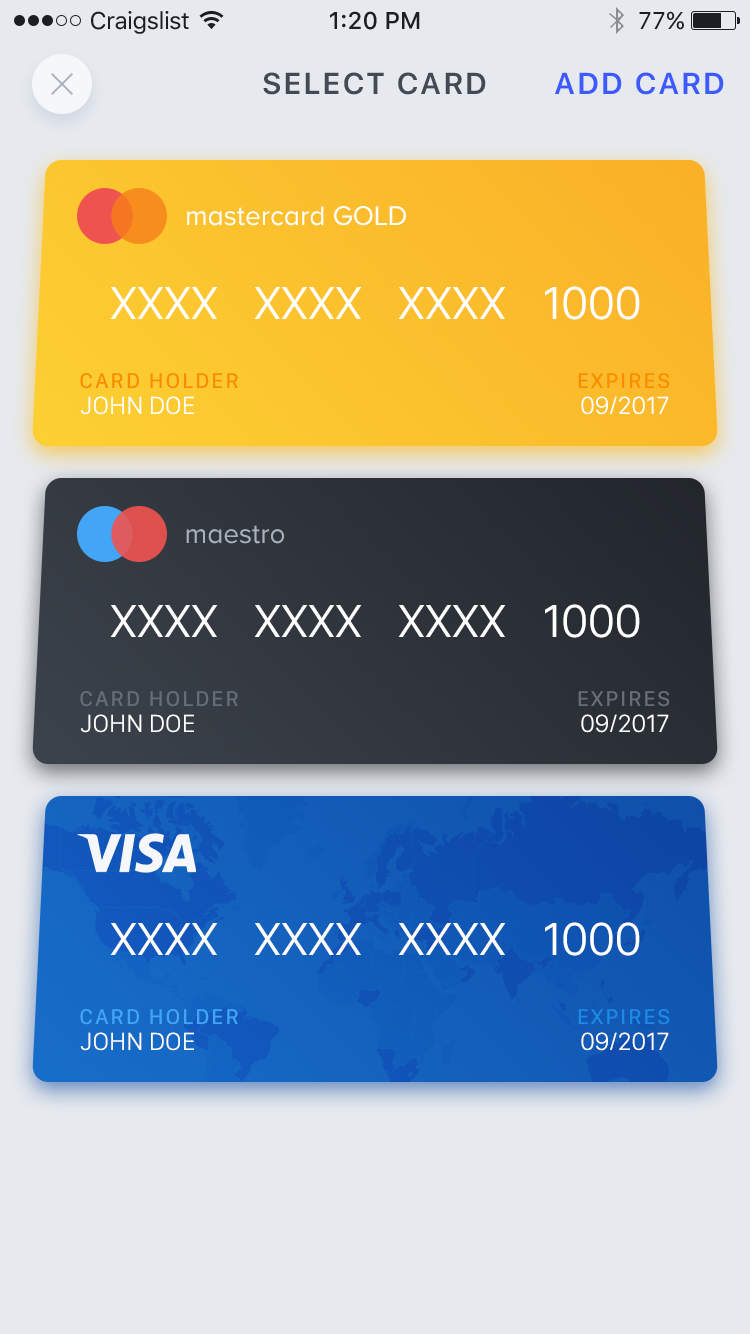
<style>
.page{position:relative;width:750px;height:1334px;background:#e6e9ed}
.page>*{position:absolute;margin:0}
.t1{font:24px "SFUIText-Regular";letter-spacing:-0.025em;color:#1b1e23}
.t2{font:24px "SFUIText-Medium";color:#1b1e23}
.t3{font:24px "SFUIText-Regular";color:#1b1e23}
.t4{font:30px "SFUIDisplay-Semibold";letter-spacing:0.1em;color:#434a54;text-transform:uppercase}
.t5{font:30px "SFUIDisplay-Semibold";letter-spacing:0.1em;color:#3d5afe;text-transform:uppercase}
.t6{font:28px "ProximaNovaA-Regular";color:#ffffff}
.t7{font:48px "SFCompactDisplay-Regular";color:#ffffff;text-transform:uppercase}
.t8{font:22px "SFCompactDisplay-Medium";letter-spacing:0.1em;color:#fb8c00;text-transform:uppercase}
.t9{font:26px "SFCompactDisplay-Regular";color:#ffffff;text-transform:uppercase}
.t10{font:28px "ProximaNovaA-Regular";color:#aab2bd}
.t11{font:22px "SFCompactDisplay-Medium";letter-spacing:0.1em;color:#656d78;text-transform:uppercase}
.t12{font:22px "SFCompactDisplay-Medium";letter-spacing:0.1em;color:#42a5f5;text-transform:uppercase}
.t13{font:22px "SFCompactDisplay-Medium";letter-spacing:0.1em;color:#1e88e5;text-transform:uppercase}
</style>
<div class="page">
<p class="t1" style="left:91px;top:11px;width:98px;height:23px">Craigslist</p>
<p class="t2" style="left:330px;top:11px;width:90px;height:19px">1:20 PM</p>
<p class="t3" style="left:639px;top:11px;width:45px;height:19px">77%</p>
<p class="t4" style="left:263px;top:72px;width:223px;height:23px">Select card</p>
<p class="t5" style="left:555px;top:72px;width:169px;height:23px">Add card</p>
<p class="t6" style="left:187px;top:206px;width:219px;height:20px">mastercard GOLD</p>
<p class="t7" style="left:110px;top:286px;width:530px;height:34px">xxxx  xxxx  xxxx  1000</p>
<p class="t8" style="left:80px;top:373px;width:158px;height:16px">Card holder</p>
<p class="t8" style="left:578px;top:373px;width:92px;height:16px">Expires</p>
<p class="t9" style="left:80px;top:396px;width:114px;height:19px">John Doe</p>
<p class="t9" style="left:581px;top:396px;width:88px;height:19px">09/2017</p>
<p class="t10" style="left:186px;top:525px;width:98px;height:19px">maestro</p>
<p class="t7" style="left:110px;top:604px;width:530px;height:34px">xxxx  xxxx  xxxx  1000</p>
<p class="t11" style="left:80px;top:691px;width:158px;height:16px">Card holder</p>
<p class="t11" style="left:578px;top:691px;width:92px;height:16px">Expires</p>
<p class="t9" style="left:80px;top:714px;width:114px;height:19px">John Doe</p>
<p class="t9" style="left:581px;top:714px;width:88px;height:19px">09/2017</p>
<p class="t7" style="left:110px;top:922px;width:530px;height:34px">xxxx  xxxx  xxxx  1000</p>
<p class="t12" style="left:80px;top:1009px;width:158px;height:16px">Card holder</p>
<p class="t13" style="left:578px;top:1009px;width:92px;height:16px">Expires</p>
<p class="t9" style="left:80px;top:1032px;width:114px;height:19px">John Doe</p>
<p class="t9" style="left:581px;top:1032px;width:88px;height:19px">09/2017</p>
</div>
